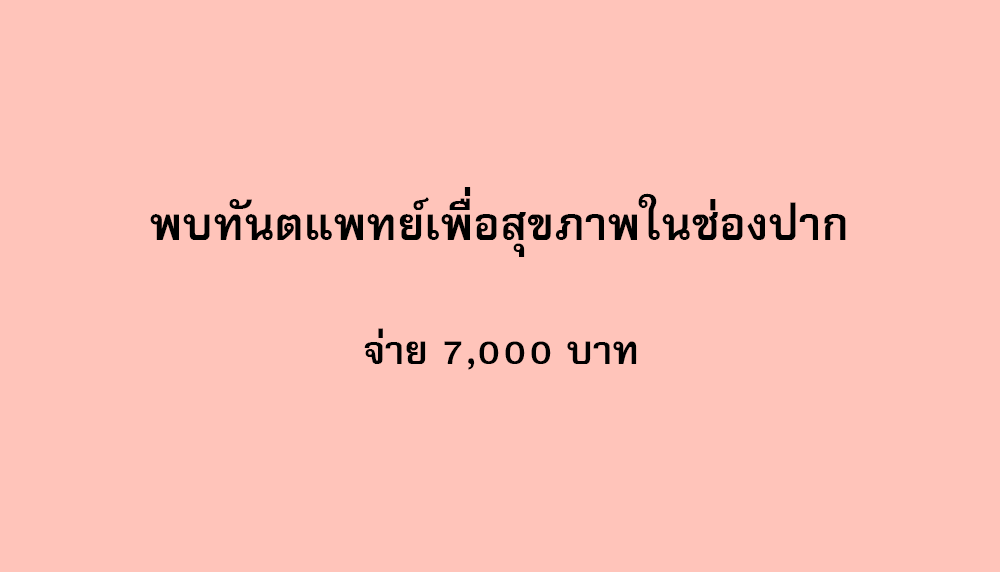
<style>
.page{position:relative;width:1000px;height:572px;background:#ffc4ba}
.page>*{position:absolute;margin:0}
.t1{font:64px "FreesiaUPCBold";color:#000000}
.t2{font:56px "FreesiaUPCBold";color:#000000}
</style>
<div class="page">
<p class="t1" style="left:150px;top:187px;width:696px;height:70px">พบทันตแพทย์เพื่อสุขภาพในช่องปาก</p>
<p class="t2" style="left:364px;top:328px;width:273px;height:42px">จ่าย 7,000 บาท</p>
</div>
